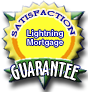
<style>
.page{position:relative;width:88px;height:92px}
.page>*{position:absolute;margin:0}
.t1{font:7.1px "CalifornianFB-Reg";color:#000099}
.t2{font:8px "Helvetica-Bold";color:#ffffff}
.t3{font:19.5px "OzHandicraftBT-Roman";color:#ffffff}
</style>
<div class="page">
<p class="t1" style="left:11px;top:10px;width:65px;height:27px">SATISFACTION</p>
<p class="t2" style="left:27px;top:30px;width:36px;height:17px;text-align:center">Lightning <br>Mortgage</p>
<p class="t3" style="left:11px;top:60px;width:69px;height:21px">GUARANTEE</p>
</div>
